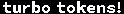
<style>
.page{position:relative;width:124px;height:14px;background:#000000}
.page>*{position:absolute;margin:0}
.t1{font:16.7px "SourceCodePro-Bold";color:#ffffff}
</style>
<div class="page">
<p class="t1" style="left:3px;top:1px;width:118px;height:12px">turbo tokens!</p>
</div>
